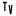
<style>
.page{position:relative;width:16px;height:16px;background:#ffffff}
.page>*{position:absolute;margin:0}
.t1{font:12.5px "LeagueGothic";letter-spacing:-0.025em;color:#000000}
</style>
<div class="page">
<p class="t1" style="left:3px;top:1px;width:4px;height:10px">T</p>
<p class="t1" style="left:8px;top:5px;width:5px;height:10px">V</p>
</div>
